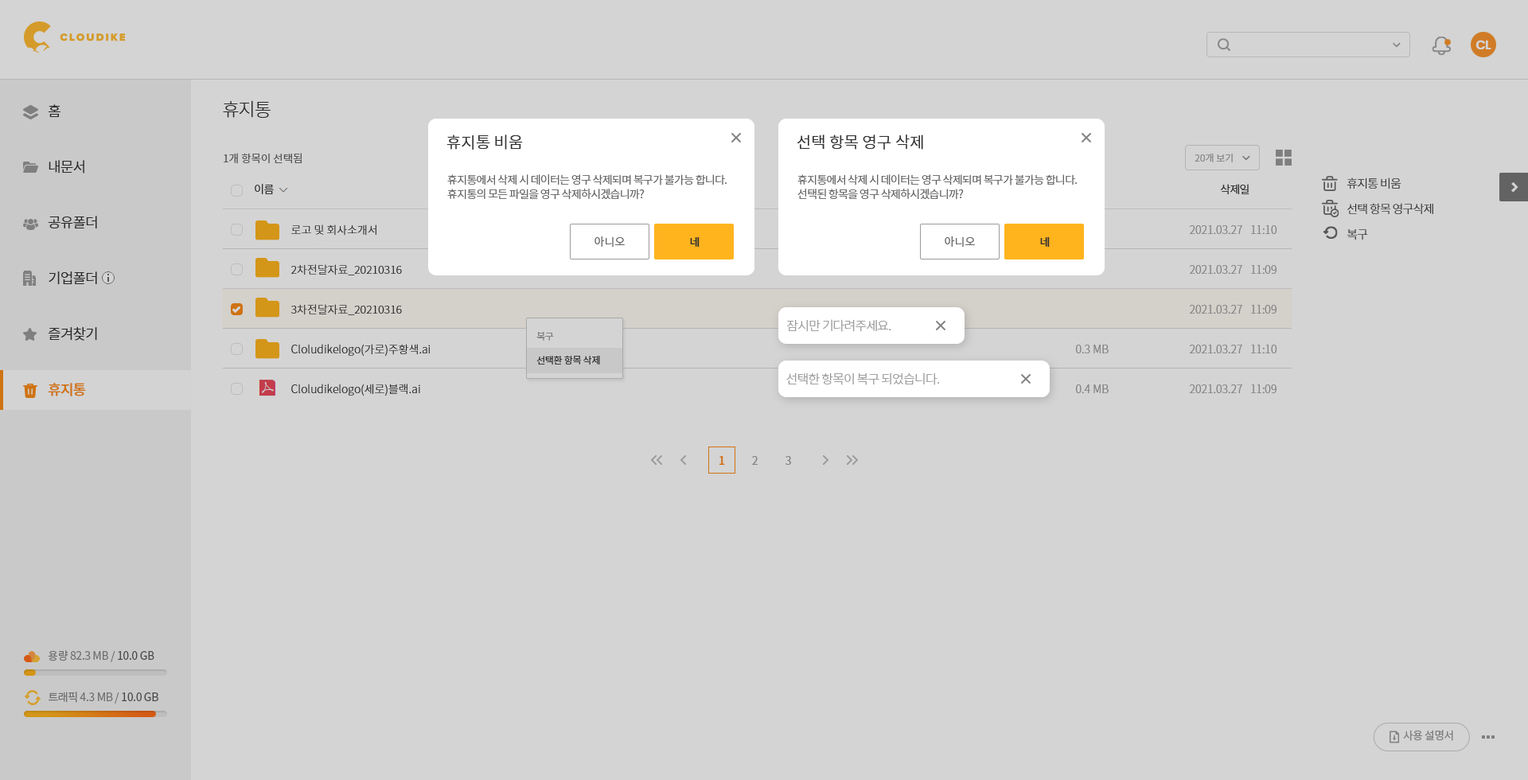
<style>
.page{position:relative;width:1528px;height:780px;background:#d4d4d4}
.page>*{position:absolute;margin:0}
.t1{font:12.7px "Poppins-SemiBold";letter-spacing:-0.05em;color:#d4d4d4}
.t2{font:18.3px "NotoSansCJKkr-Light";letter-spacing:-0.05em;color:#333333}
.t3{font:14.3px/55.7px "NotoSansCJKkr-DemiLight";letter-spacing:-0.05em;color:#333333}
.t4{font:14.3px/55.7px "NotoSansCJKkr-Medium";letter-spacing:-0.05em;color:#f98a17}
.t5{font:15.9px "NotoSansCJKkr-DemiLight";color:#333333}
.t6{font:10.7px "NotoSansCJKkr-DemiLight";color:#666666}
.t7{font:9.6px "NotoSansCJKkr-DemiLight";color:#a1a1a1}
.t8{font:11.1px "NotoSansCJKkr-DemiLight";letter-spacing:-0.05em;color:#333333}
.t9{font:11.1px/14.3px "NotoSansCJKkr-DemiLight";letter-spacing:-0.05em;color:#666666}
.t10{font:11.9px/25.5px "NotoSansCJKkr-Light";letter-spacing:-0.05em;color:#333333}
.t11{font:11.1px/39.8px "NotoSansCJKkr-Light";color:#333333}
.t12{font:11.1px/39.8px "NotoSansCJKkr-Light";color:#999999}
.t13{font:11.1px "NotoSansCJKkr-Regular";color:#666666}
.t14{font:11.1px "NotoSansCJKkr-Medium";color:#333333}
.t15{font:12.7px "NotoSansCJKkr-Light";letter-spacing:-0.05em;color:#999999}
.t16{font:9.6px/23.9px "NotoSansCJKkr-DemiLight";letter-spacing:-0.025em;color:#333333}
.t17{font:9.6px/23.9px "NotoSansCJKkr-DemiLight";letter-spacing:-0.025em;color:#999999}
.t18{font:11.1px/39.8px "NotoSansCJKkr-Light";color:#7f7f7f}
.t19{font:11.1px "NotoSansCJKkr-Medium";color:#cf7313}
.t20{font:11.1px "NotoSansCJKkr-DemiLight";color:#999999}
.t21{font:11.1px "NotoSansCJKkr-Regular";letter-spacing:-0.025em;color:#888888}
.t22{font:11.1px "NotoSansCJKkr-Regular";letter-spacing:-0.025em;color:#585858}
.t23{font:11.1px "NotoSansCJKkr-Regular";letter-spacing:-0.05em;color:#7f7f7f}
</style>
<div class="page">
<p class="t1" style="left:1476px;top:40px;width:16px;height:9px">CL</p>
<p class="t2" style="left:223px;top:100px;width:48px;height:18px">휴지통</p>
<p class="t3" style="left:48px;top:104px;width:49px;height:292px">홈<br>내문서<br>공유폴더<br>기업폴더<br>즐겨찾기<br><span class="t4">휴지통</span></p>
<p class="t5" style="left:447px;top:135px;width:76px;height:15px">휴지통 비움</p>
<p class="t5" style="left:798px;top:135px;width:125px;height:15px">선택 항목 영구 삭제</p>
<p class="t6" style="left:224px;top:153px;width:78px;height:11px">1개 항목이 선택됨</p>
<p class="t7" style="left:1195px;top:153px;width:38px;height:9px">20개 보기</p>
<p class="t8" style="left:255px;top:184px;width:19px;height:10px">이름</p>
<p class="t9" style="left:447px;top:174px;width:280px;height:26px">휴지통에서 삭제 시 데이터는 영구 삭제되며 복구가 불가능 합니다.<br>휴지통의 모든 파일을 영구 삭제하시겠습니까?</p>
<p class="t9" style="left:798px;top:174px;width:279px;height:26px">휴지통에서 삭제 시 데이터는 영구 삭제되며 복구가 불가능 합니다.<br>선택된 항목을 영구 삭제하시겠습니까?</p>
<p class="t8" style="left:1220px;top:184px;width:30px;height:11px">삭제일</p>
<p class="t10" style="left:1347px;top:178px;width:87px;height:62px">휴지통 비움<br>선택 항목 영구삭제<br>복구</p>
<p class="t11" style="left:291px;top:224px;width:140px;height:172px">로고 및 회사소개서<br>2차전달자료_20210316<br>3차전달자료_20210316<br>Cloludikelogo(가로)주황색.ai<br>Cloludikelogo(세로)블랙.ai</p>
<p class="t12" style="left:1190px;top:225px;width:88px;height:168px">2021.03.27   11:10<br>2021.03.27   11:09<br>2021.03.27   11:09<br>2021.03.27   11:10<br>2021.03.27   11:09</p>
<p class="t13" style="left:595px;top:236px;width:30px;height:12px">아니오</p>
<p class="t14" style="left:690px;top:236px;width:10px;height:12px">네</p>
<p class="t13" style="left:945px;top:236px;width:30px;height:12px">아니오</p>
<p class="t14" style="left:1040px;top:236px;width:10px;height:12px">네</p>
<p class="t15" style="left:787px;top:319px;width:105px;height:13px">잠시만 기다려주세요.</p>
<p class="t16" style="left:537px;top:332px;width:63px;height:33px"><span class="t17">복구<br></span>선택환 항목 삭제</p>
<p class="t18" style="left:1076px;top:345px;width:33px;height:48px">0.3 MB<br>0.4 MB</p>
<p class="t15" style="left:787px;top:373px;width:152px;height:12px">선택한 항목이 복구 되었습니다.</p>
<p class="t19" style="left:720px;top:456px;width:5px;height:9px">1</p>
<p class="t20" style="left:752px;top:456px;width:6px;height:9px">2</p>
<p class="t20" style="left:786px;top:456px;width:5px;height:9px">3</p>
<p class="t21" style="left:48px;top:650px;width:106px;height:12px">용량 82.3 MB / <span class="t22">10.0 GB</span></p>
<p class="t21" style="left:49px;top:692px;width:109px;height:12px">트래픽 4.3 MB / <span class="t22">10.0 GB</span></p>
<p class="t23" style="left:1403px;top:730px;width:51px;height:11px">사용 설명서</p>
</div>
